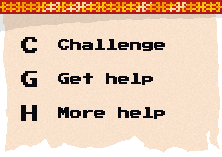
<style>
.page{position:relative;width:222px;height:157px}
.page>*{position:absolute;margin:0}
.t1{font:18px "PressStart2P";color:#0a0910}
.t2{font:12px "PressStart2P";color:#0a0910}
</style>
<div class="page">
<p class="t1" style="left:21px;top:37px;width:16px;height:16px">C</p>
<p class="t2" style="left:58px;top:39px;width:107px;height:12px">Challenge</p>
<p class="t1" style="left:21px;top:71px;width:16px;height:16px">G</p>
<p class="t2" style="left:58px;top:73px;width:95px;height:12px">Get help</p>
<p class="t1" style="left:21px;top:105px;width:16px;height:16px">H</p>
<p class="t2" style="left:58px;top:107px;width:107px;height:12px">More help</p>
</div>
